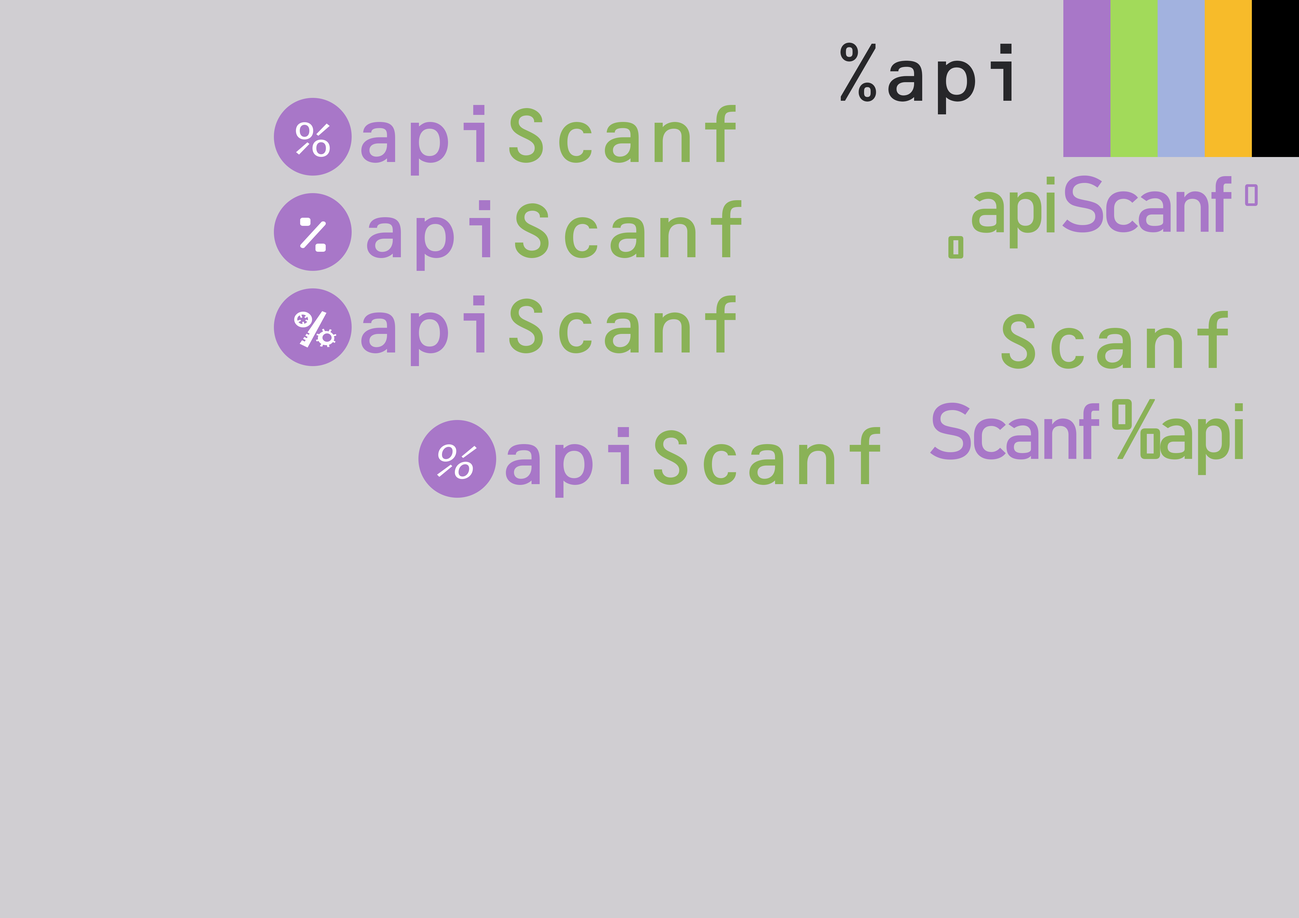
<style>
.page{position:relative;width:1299px;height:918px;background:#d0ced2}
.page>*{position:absolute;margin:0}
.t1{font:78.5px "OCRBStd";letter-spacing:-0.1em;color:#27272a}
.t2{font:78.5px "OCRBStd";letter-spacing:-0.1em;color:#8ab257}
.t3{font:78.5px "OCRBStd";letter-spacing:-0.1em;color:#a877c8}
.t4{font:52.4px "SourceCodePro-Regular";letter-spacing:-0.1em;color:#ffffff;scale:1.18 1}
.t5{font:78.5px "Bahnschrift";letter-spacing:-0.075em;color:#8ab257}
.t6{font:78.5px "Bahnschrift";letter-spacing:-0.075em;color:#27272a}
.t7{font:78.5px "AgencyFB-Bold";letter-spacing:-0.075em;color:#8ab257}
.t8{font:78.5px "Bahnschrift";letter-spacing:-0.075em;color:#a877c8}
.t9{font:78.5px "AgencyFB-Reg";letter-spacing:-0.075em;color:#a877c8}
.t10{font:52.4px "OCRAExtended";letter-spacing:-0.1em;color:#ffffff;scale:1.18 1}
.t11{font:39.3px "Jokerman-Regular";letter-spacing:-0.1em;color:#ffffff;scale:1.18 1}
</style>
<div class="page">
<p class="t1" style="left:840px;top:42px;width:171px;height:72px">%api</p>
<p class="t2" style="left:361px;top:105px;width:375px;height:71px"><span class="t3">api</span>Scanf</p>
<p class="t4" style="left:296px;top:122px;width:34px;height:35px">%</p>
<p class="t5" style="left:948px;top:177px;width:106px;height:82px"><span class="t6"> </span><span class="t7">o </span>api</p>
<p class="t8" style="left:1062px;top:175px;width:195px;height:58px">Scanf <span class="t9">o</span></p>
<p class="t2" style="left:367px;top:200px;width:374px;height:71px"><span class="t3">api</span>Scanf</p>
<p class="t10" style="left:300px;top:218px;width:26px;height:34px">%</p>
<p class="t2" style="left:361px;top:296px;width:375px;height:70px"><span class="t3">api</span>Scanf</p>
<p class="t11" style="left:294px;top:311px;width:42px;height:37px">%</p>
<p class="t2" style="left:1001px;top:311px;width:227px;height:58px">Scanf</p>
<p class="t8" style="left:930px;top:399px;width:313px;height:76px">Scanf <span class="t7">%</span><span class="t5">api</span></p>
<p class="t2" style="left:506px;top:427px;width:374px;height:71px"><span class="t3">api</span>Scanf</p>
<p class="t4" style="left:437px;top:444px;width:40px;height:35px">%</p>
</div>
